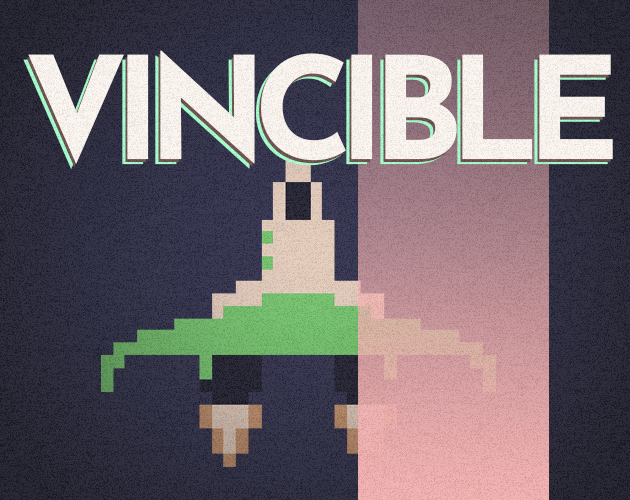
<style>
.page{position:relative;width:630px;height:500px}
.page>*{position:absolute;margin:0}
.t1{font:141.7px "JosefinSans-Bold";letter-spacing:-0.1em;color:#f8f1ec}
.t2{font:141.7px "JosefinSans-Bold";letter-spacing:-0.1em;color:#fbf5ef}
.t3{font:141.7px "JosefinSans-Bold";letter-spacing:-0.1em;color:#f4f1e8}
</style>
<div class="page">
<p class="t1" style="left:26px;top:53px;width:585px;height:114px">VINCIBLE</p>
<p class="t2" style="left:28px;top:50px;width:585px;height:114px">VINCIBLE</p>
<p class="t3" style="left:23px;top:55px;width:585px;height:114px">VINCIBLE</p>
</div>
